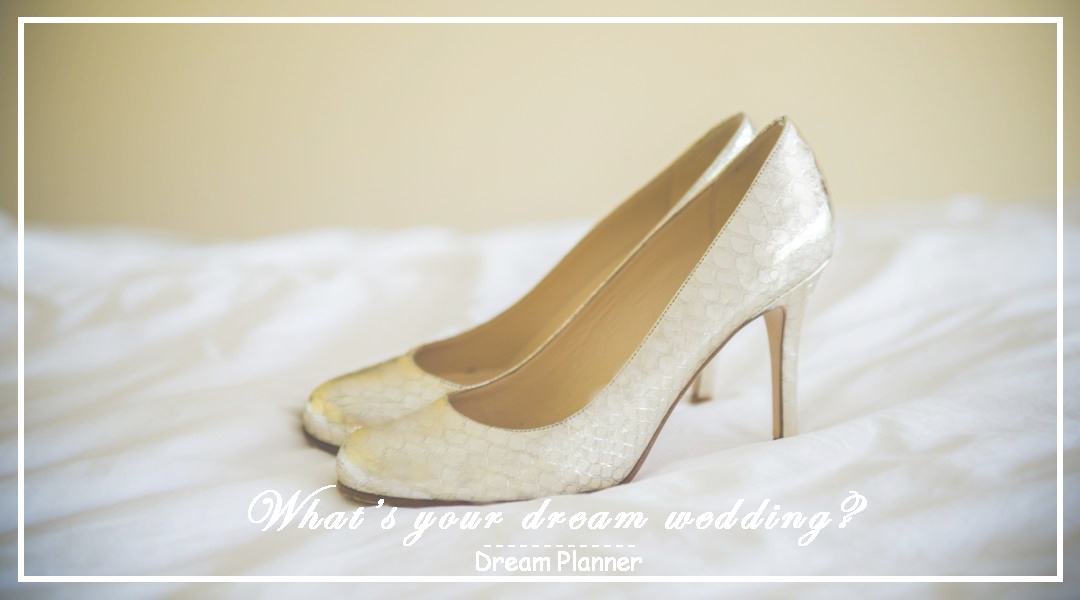
<style>
.page{position:relative;width:1080px;height:600px}
.page>*{position:absolute;margin:0}
.t1{font:56px "EdwardianScriptITC";letter-spacing:0.08em;color:#ffffff;font-weight:bold}
.t2{font:25px/20px "EdwardianScriptITC";letter-spacing:0.08em;color:#ffffff;font-weight:bold}
.t3{font:25px/20px "ComicSansMS";letter-spacing:-0.04em;color:#ffffff;font-weight:bold}
</style>
<div class="page">
<p class="t1" style="left:248px;top:485px;width:619px;height:61px">What’s your dream wedding?</p>
<p class="t2" style="left:476px;top:545px;width:166px;height:26px;text-align:center">-------------<br><span class="t3">Dream Planner</span></p>
</div>
